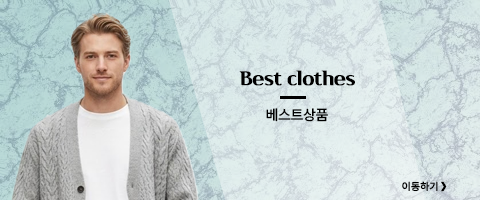
<style>
.page{position:relative;width:480px;height:200px}
.page>*{position:absolute;margin:0}
.t1{font:20px "Cafe24Danjunghae";letter-spacing:-0.025em;color:#000000;font-weight:bold}
.t2{font:14px "NotoSansKR-Regular";letter-spacing:-0.025em;color:#000000;font-weight:bold}
.t3{font:10px "NotoSansKR-Medium";letter-spacing:-0.025em;color:#000000;font-weight:bold}
.t4{font:12px "KBLJump_BTTF";letter-spacing:-0.025em;color:#000000;font-weight:bold}
</style>
<div class="page">
<p class="t1" style="left:239px;top:70px;width:116px;height:16px">Best clothes</p>
<p class="t2" style="left:266px;top:108px;width:62px;height:14px">베스트상품</p>
<p class="t3" style="left:402px;top:181px;width:36px;height:11px">이동하기</p>
<p class="t4" style="left:441px;top:181px;width:6px;height:11px">&gt;</p>
</div>
